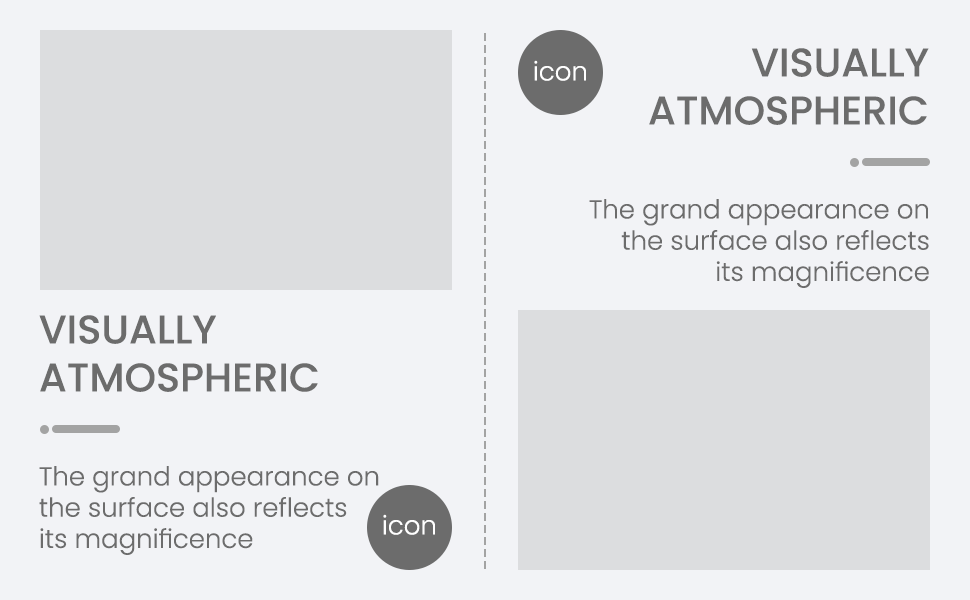
<style>
.page{position:relative;width:970px;height:600px;background:#f2f3f6}
.page>*{position:absolute;margin:0}
.t1{font:40px "Poppins-Medium";color:#6c6c6c}
.t2{font:26px "Poppins-Light";color:#ffffff}
.t3{font:26px "Poppins-Light";color:#6c6c6c}
</style>
<div class="page">
<p class="t1" style="left:649px;top:48px;width:280px;height:77px;text-align:right">VISUALLY<br>ATMOSPHERIC</p>
<p class="t2" style="left:534px;top:60px;width:52px;height:21px">icon</p>
<p class="t3" style="left:589px;top:199px;width:340px;height:89px;text-align:right">The grand appearance on<br> the surface also reflects<br>its magnificence</p>
<p class="t1" style="left:39px;top:315px;width:279px;height:77px">VISUALLY<br>ATMOSPHERIC</p>
<p class="t3" style="left:39px;top:466px;width:340px;height:89px">The grand appearance on<br>the surface also reflects<br>its magnificence</p>
<p class="t2" style="left:383px;top:514px;width:52px;height:21px">icon</p>
</div>
